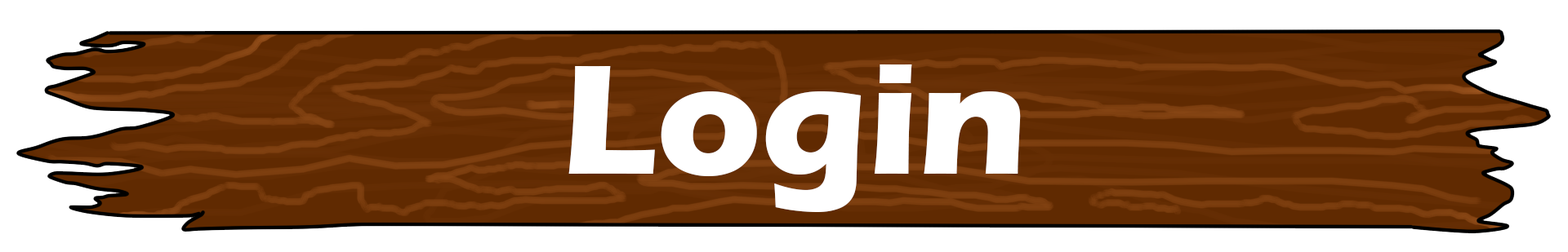
<style>
.page{position:relative;width:1568px;height:252px;background:#ffffff}
.page>*{position:absolute;margin:0}
.t1{font:161.5px "ErasITC-Bold";color:#ffffff}
</style>
<div class="page">
<p class="t1" style="left:568px;top:65px;width:453px;height:147px">Login</p>
</div>
